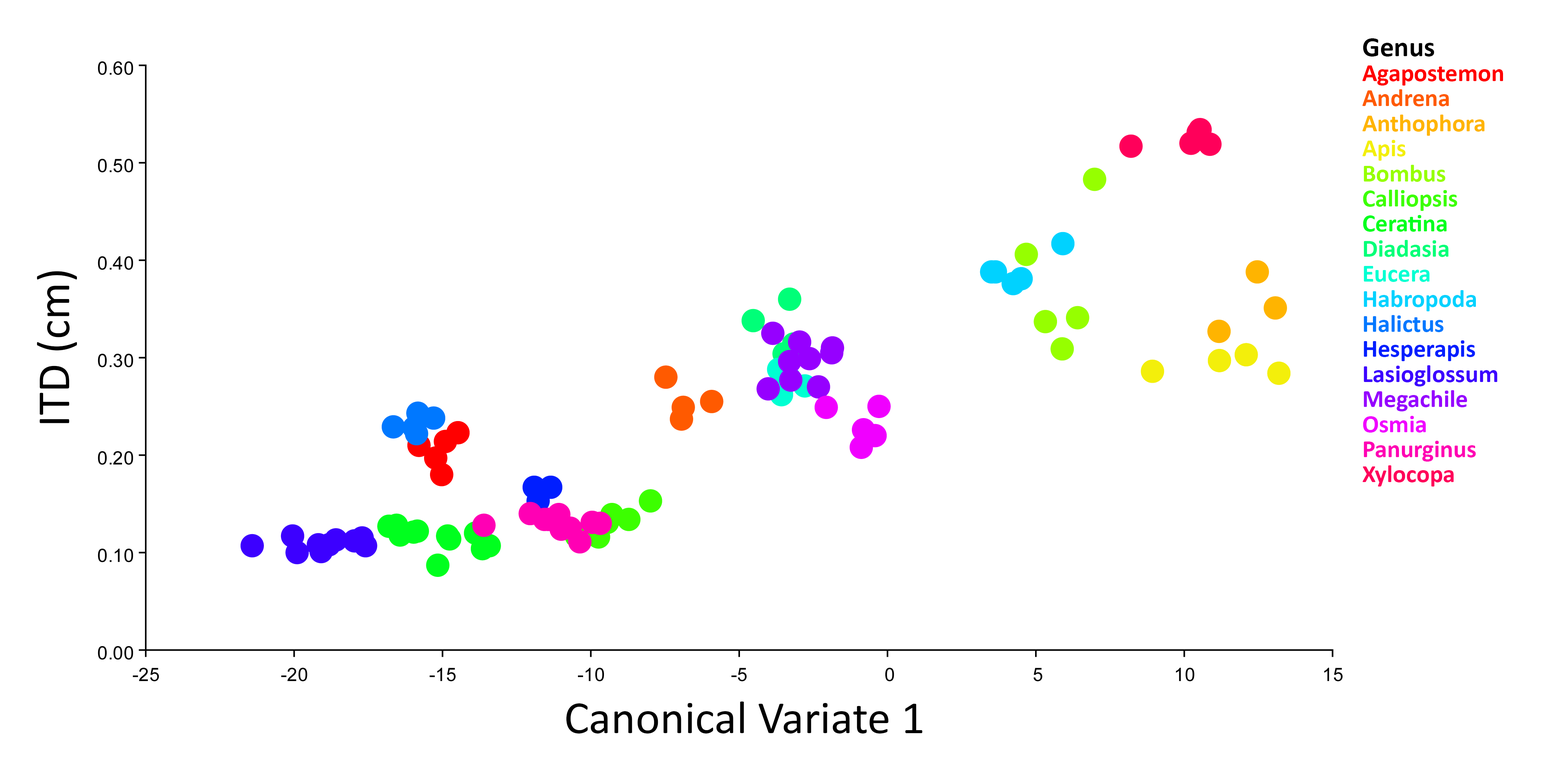
<style>
.page{position:relative;width:1561px;height:764px;background:#ffffff}
.page>*{position:absolute;margin:0}
.t1{font:24.8px/25.1px "Calibri-Bold";color:#3c00ff}
.t2{font:27.9px/25.1px "Calibri-Bold";color:#000000}
.t3{font:24.8px/25.1px "Calibri-Bold";color:#ff0000}
.t4{font:24.8px/25.1px "Calibri-Bold";color:#ff5a00}
.t5{font:24.8px/25.1px "Calibri-Bold";color:#ffb400}
.t6{font:24.8px/25.1px "Calibri-Bold";color:#f0ff00}
.t7{font:24.8px/25.1px "Calibri-Bold";color:#96ff00}
.t8{font:24.8px/25.1px "Calibri-Bold";color:#3cff00}
.t9{font:24.8px/25.1px "Calibri-Bold";color:#00ff1e}
.t10{font:24.8px/25.1px "Calibri-Bold";color:#00ff78}
.t11{font:24.8px/25.1px "Calibri-Bold";color:#00ffd2}
.t12{font:24.8px/25.1px "Calibri-Bold";color:#00d2ff}
.t13{font:24.8px/25.1px "Calibri-Bold";color:#0078ff}
.t14{font:24.8px/25.1px "Calibri-Bold";color:#001eff}
.t15{font:24.8px/25.1px "Calibri-Bold";color:#9600ff}
.t16{font:24.8px/25.1px "Calibri-Bold";color:#f000ff}
.t17{font:24.8px/25.1px "Calibri-Bold";color:#ff00b4}
.t18{font:24.8px/25.1px "Calibri-Bold";color:#ff005a}
.t19{font:46.5px "Calibri";color:#000000}
</style>
<div class="page">
<p class="t1" style="left:1363px;top:38px;width:140px;height:448px"><span class="t2">Genus<br></span><span class="t3">Agapostemon<br></span><span class="t4">Andrena<br></span><span class="t5">Anthophora<br></span><span class="t6">Apis<br></span><span class="t7">Bombus<br></span><span class="t8">Calliopsis<br></span><span class="t9">Ceratina<br></span><span class="t10">Diadasia<br></span><span class="t11">Eucera<br></span><span class="t12">Habropoda<br></span><span class="t13">Halictus<br></span><span class="t14">Hesperapis<br></span>Lasioglossum<br><span class="t15">Megachile<br></span><span class="t16">Osmia<br></span><span class="t17">Panurginus<br></span><span class="t18">Xylocopa</span></p>
<p class="t19" style="left:37px;top:271px;width:40px;height:152px;rotate:-90deg">ITD (cm)</p>
<p class="t19" style="left:566px;top:701px;width:357px;height:32px">Canonical Variate 1</p>
</div>
